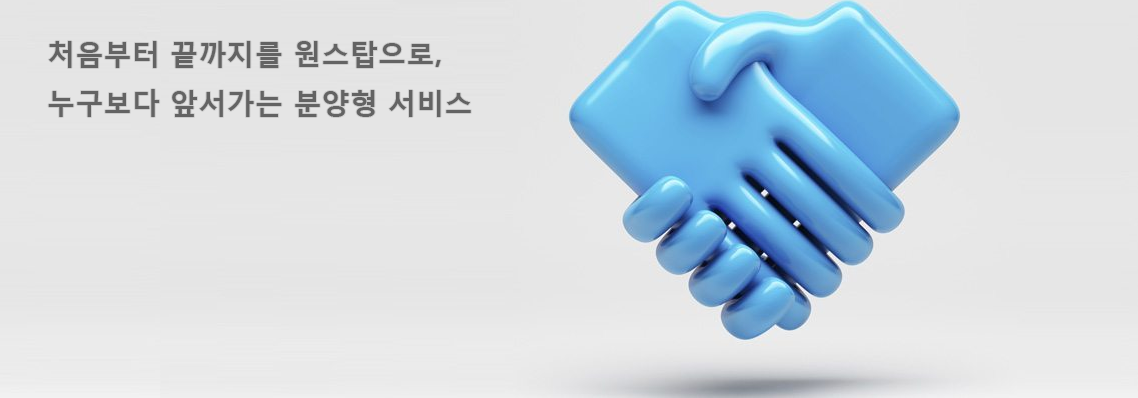
<style>
.page{position:relative;width:1138px;height:398px;background:#e6e6e6}
.page>*{position:absolute;margin:0}
.t1{font:28.3px/49px "MalgunGothicBold";color:#636363}
</style>
<div class="page">
<p class="t1" style="left:48px;top:41px;width:423px;height:76px">처음부터 끝까지를 원스탑으로,<br>누구보다 앞서가는 분양형 서비스</p>
</div>
